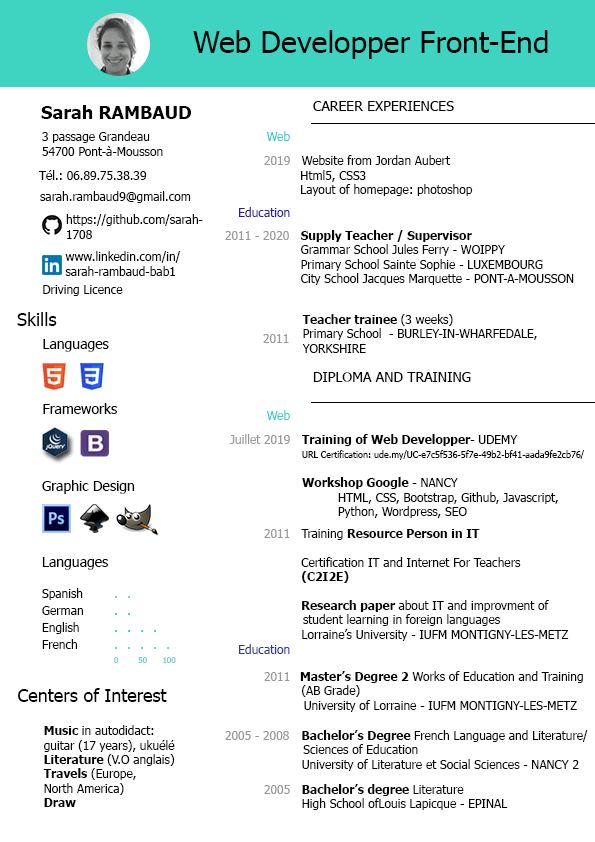
<style>
.page{position:relative;width:595px;height:842px;background:#ffffff}
.page>*{position:absolute;margin:0}
.t1{font:30px "Tahoma";color:#060606}
.t2{font:14px "Tahoma";color:#050505}
.t3{font:18px "Tahoma-Bold";color:#050505}
.t4{font:12px "Tahoma";color:#000000}
.t5{font:12px "Tahoma";color:#33cccc}
.t6{font:12px "Tahoma";color:#999999}
.t7{font:12px "Tahoma";color:#050505}
.t8{font:12px "Tahoma";color:#2b1c97}
.t9{font:12.1px "Tahoma";color:#000000}
.t10{font:12px "Tahoma-Bold";color:#050505}
.t11{font:18px "Tahoma";color:#000000}
.t12{font:14px "Tahoma";color:#000000}
.t13{font:12px "Tahoma-Bold";color:#000000}
.t14{font:9px "Tahoma";color:#000000}
.t15{font:8px "Tahoma";color:#66cccc}
.t16{font:14px "Tahoma";color:#66cccc}
.t17{font:14px "Tahoma";color:#33cccc}
.t18{font:12px "Tahoma";color:#333399}
</style>
<div class="page">
<p class="t1" style="left:193px;top:30px;width:355px;height:29px">Web Developper Front-End</p>
<p class="t2" style="left:313px;top:101px;width:141px;height:10px">CAREER EXPERIENCES</p>
<p class="t3" style="left:41px;top:105px;width:150px;height:14px">Sarah RAMBAUD</p>
<p class="t4" style="left:42px;top:131px;width:121px;height:25px">3 passage Grandeau<br>54700 Pont-à-Mousson</p>
<p class="t5" style="left:266px;top:131px;width:24px;height:10px">Web</p>
<p class="t6" style="left:264px;top:156px;width:26px;height:9px">2019</p>
<p class="t7" style="left:301px;top:155px;width:172px;height:41px">Website from Jordan Aubert<br> Html5, CSS3<br> Layout of homepage: photoshop</p>
<p class="t7" style="left:38px;top:170px;width:109px;height:10px">Tél.: 06.89.75.38.39</p>
<p class="t7" style="left:40px;top:191px;width:151px;height:12px">sarah.rambaud9@gmail.com</p>
<p class="t8" style="left:239px;top:207px;width:51px;height:10px">Education</p>
<p class="t9" style="left:66px;top:214px;width:137px;height:25px">https://github.com/sarah-1708</p>
<p class="t6" style="left:225px;top:231px;width:64px;height:9px">2011 - 2020</p>
<p class="t7" style="left:301px;top:230px;width:273px;height:55px"><span class="t10">Supply Teacher / Supervisor<br></span>   Grammar School Jules Ferry - WOIPPY<br>   Primary School Sainte Sophie - LUXEMBOURG<br>   City School Jacques Marquette - PONT-A-MOUSSON</p>
<p class="t4" style="left:65px;top:251px;width:115px;height:25px">www.linkedin.com/in/sarah-rambaud-bab119189</p>
<p class="t4" style="left:43px;top:285px;width:80px;height:11px">Driving Licence</p>
<p class="t11" style="left:17px;top:312px;width:40px;height:14px">Skills</p>
<p class="t7" style="left:302px;top:314px;width:235px;height:39px"><span class="t10">Teacher trainee </span>(3 weeks)<br>  Primary School  - BURLEY-IN-WHARFEDALE, <br>  YORKSHIRE</p>
<p class="t12" style="left:43px;top:339px;width:66px;height:13px">Languages</p>
<p class="t6" style="left:263px;top:334px;width:26px;height:9px">2011</p>
<p class="t2" style="left:313px;top:372px;width:158px;height:10px">DIPLOMA AND TRAINING</p>
<p class="t12" style="left:43px;top:403px;width:75px;height:11px">Frameworks</p>
<p class="t5" style="left:266px;top:410px;width:24px;height:10px">Web</p>
<p class="t6" style="left:229px;top:434px;width:61px;height:10px">Juillet 2019</p>
<p class="t4" style="left:301px;top:434px;width:283px;height:84px"><span class="t13">Training of Web Developper</span>- UDEMY<br>  <span class="t14">URL Certification: ude.my/UC-e7c5f536-5f7e-49b2-bf41-aada9fe2cb76/<br>   <br>          </span><span class="t13">Workshop Google</span> - NANCY<br>   HTML, CSS, Bootstrap, Github, Javascript, <br>   Python, Wordpress, SEO</p>
<p class="t12" style="left:42px;top:480px;width:93px;height:14px">Graphic Design</p>
<p class="t6" style="left:264px;top:529px;width:26px;height:9px">2011</p>
<p class="t7" style="left:301px;top:529px;width:268px;height:112px">Training <span class="t10">Resource Person in IT <br><br>  </span>Certification IT and Internet For Teachers <br>  <span class="t10">(C2I2E)<br><br>  Research paper </span>about IT and improvment of <br>           student learning in foreign languages<br>  Lorraine’s University - IUFM MONTIGNY-LES-METZ</p>
<p class="t15" style="left:42px;top:557px;width:134px;height:107px"><span class="t12">Languages<br></span><span class="t4"><br>Spanish  </span><span class="t16">.  .<br></span><span class="t4">German  </span><span class="t17">.  .<br></span><span class="t4">English </span><span class="t17">.  .  .  .<br></span><span class="t4">French  </span><span class="t16">.  .  .  .  .<br>  </span>0        50      100</p>
<p class="t18" style="left:239px;top:644px;width:51px;height:10px">Education</p>
<p class="t6" style="left:264px;top:672px;width:26px;height:9px">2011</p>
<p class="t7" style="left:300px;top:671px;width:283px;height:41px"><span class="t10">Master’s Degree 2</span> Works of Education and Training<br>          (AB Grade)<br>  University of Lorraine - IUFM MONTIGNY-LES-METZ</p>
<p class="t4" style="left:18px;top:688px;width:157px;height:119px"><span class="t11">Centers of Interest<br><br>      </span><span class="t13">Music </span>in autodidact:<br>       guitar (17 years), ukuélé<br>       <span class="t13">Literature </span>(V.O anglais)<br>       <span class="t13">Travels</span> (Europe, <br>       North America)<br>       <span class="t13">Draw</span></p>
<p class="t6" style="left:225px;top:731px;width:64px;height:9px">2005 - 2008</p>
<p class="t7" style="left:302px;top:730px;width:286px;height:41px"><span class="t10">  Bachelor’s Degree </span>French Language and Literature/ <br>            Sciences of Education<br>   University of Literature et Social Sciences - NANCY 2</p>
<p class="t6" style="left:264px;top:785px;width:26px;height:9px">2005</p>
<p class="t7" style="left:302px;top:784px;width:206px;height:26px"><span class="t10">Bachelor’s degree </span>Literature<br>  High School ofLouis Lapicque - EPINAL</p>
</div>
